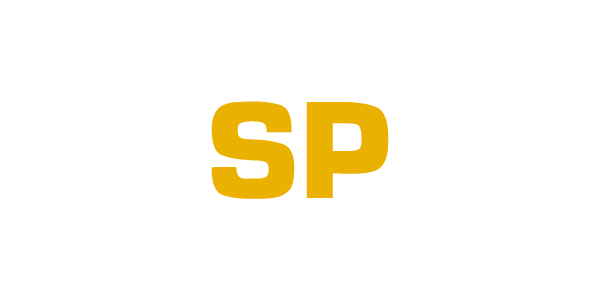
<style>
.page{position:relative;width:600px;height:300px;background:#ffffff}
.page>*{position:absolute;margin:0}
.t1{font:144px "Eurostile-Black";color:#ebb100}
</style>
<div class="page">
<p class="t1" style="left:211px;top:101px;width:178px;height:98px">SP</p>
</div>
